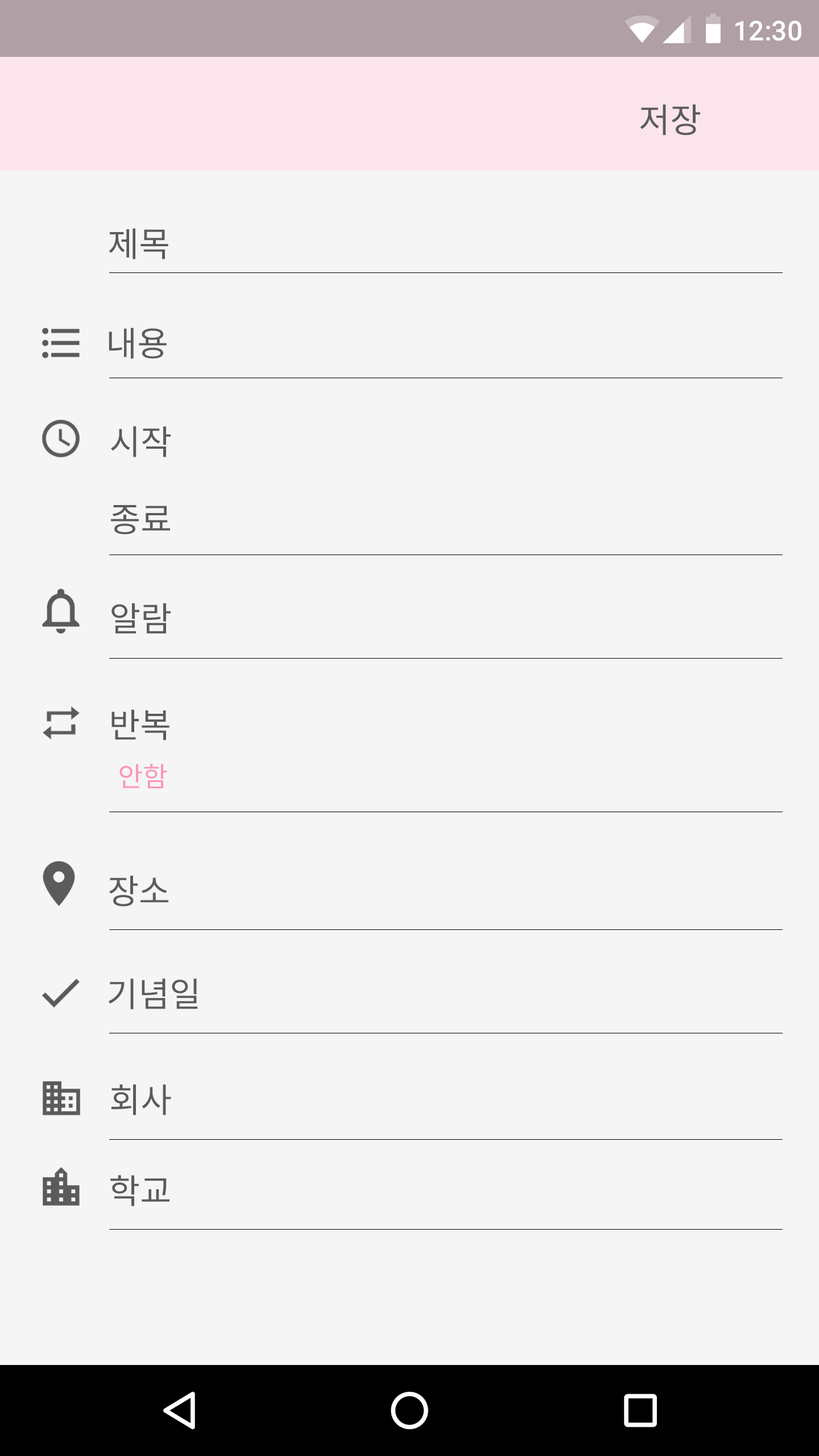
<style>
.page{position:relative;width:819px;height:1456px;background:#f5f5f5}
.page>*{position:absolute;margin:0}
.t1{font:27.3px "Roboto-Medium";color:#ffffff}
.t2{font:34.1px "NotoSansCJKkr-Regular";color:#5b5b5b}
.t3{font:27.3px "NotoSansCJKkr-Regular";color:#fb95b7}
</style>
<div class="page">
<p class="t1" style="left:735px;top:20px;width:66px;height:21px">12:30</p>
<p class="t2" style="left:640px;top:104px;width:60px;height:31px">저장</p>
<p class="t2" style="left:109px;top:228px;width:59px;height:31px">제목</p>
<p class="t2" style="left:109px;top:328px;width:58px;height:31px">내용</p>
<p class="t2" style="left:111px;top:426px;width:60px;height:31px">시작</p>
<p class="t2" style="left:111px;top:505px;width:59px;height:30px">종료</p>
<p class="t2" style="left:111px;top:603px;width:60px;height:31px">알람</p>
<p class="t2" style="left:111px;top:709px;width:58px;height:32px">반복</p>
<p class="t3" style="left:119px;top:764px;width:48px;height:24px">안함</p>
<p class="t2" style="left:109px;top:875px;width:59px;height:32px">장소</p>
<p class="t2" style="left:108px;top:978px;width:90px;height:32px">기념일</p>
<p class="t2" style="left:111px;top:1084px;width:60px;height:31px">회사</p>
<p class="t2" style="left:110px;top:1175px;width:59px;height:31px">학교</p>
</div>
